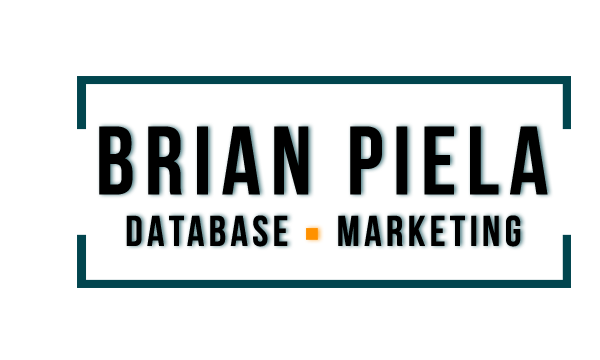
<style>
.page{position:relative;width:600px;height:360px;background:#ffffff}
.page>*{position:absolute;margin:0}
.t1{font:97px "BebasNeue";letter-spacing:0.1em;color:#000000}
.t2{font:43px "BebasNeue";letter-spacing:0.1em;color:#000000}
</style>
<div class="page">
<p class="t1" style="left:99px;top:126px;width:449px;height:69px">BRIAN PIELA</p>
<p class="t2" style="left:126px;top:215px;width:395px;height:32px">DATABASE    MARKETING</p>
</div>
